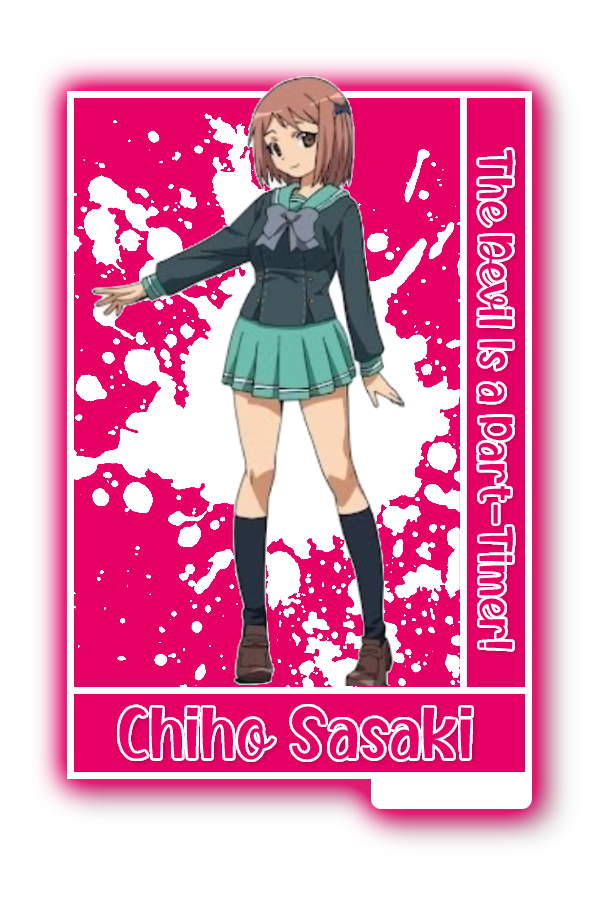
<style>
.page{position:relative;width:600px;height:900px;background:#ffffff}
.page>*{position:absolute;margin:0}
.t1{font:48.8px "ButterFood";color:#e50065}
.t2{font:75px "ButterFood";color:#e50065}
</style>
<div class="page">
<p class="t1" style="left:478px;top:149px;width:37px;height:500px;rotate:90deg">The Devil Is a Part-Timer!</p>
<p class="t2" style="left:119px;top:706px;width:353px;height:55px">Chiho Sasaki</p>
</div>
